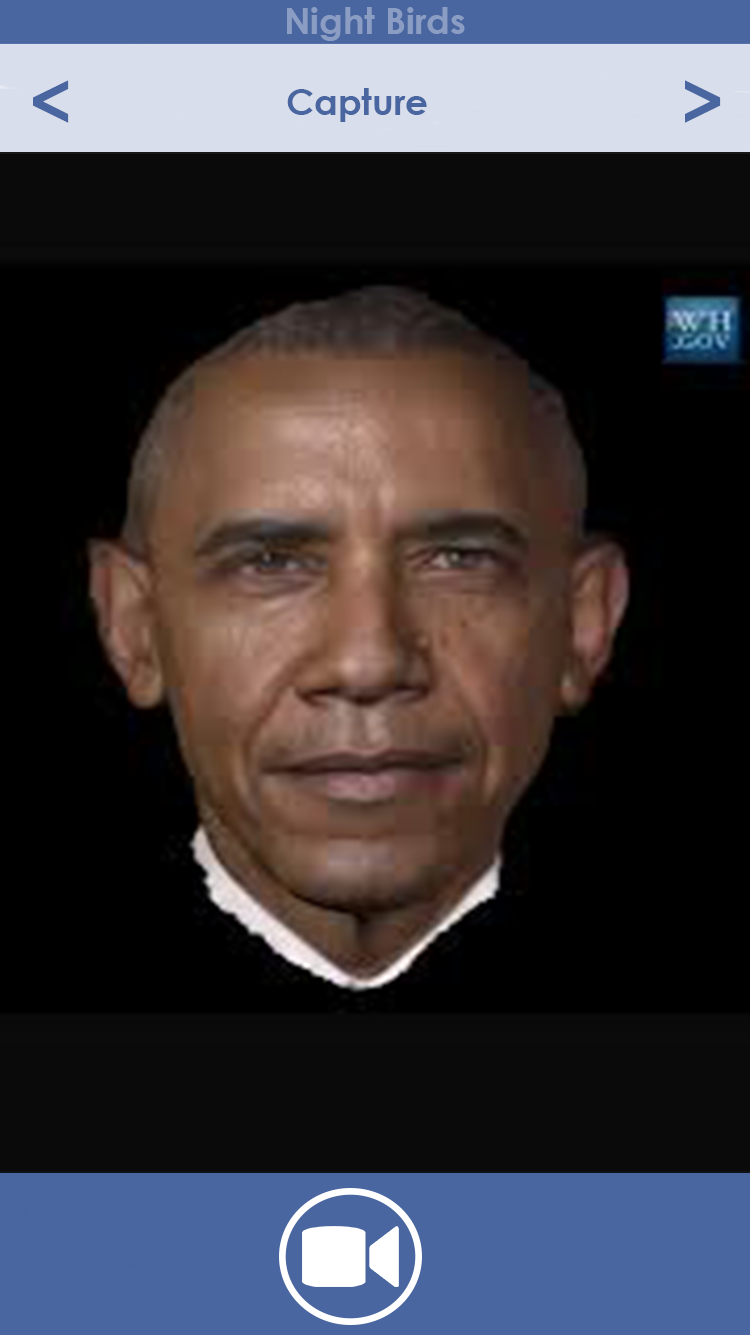
<style>
.page{position:relative;width:750px;height:1335px;background:#000000}
.page>*{position:absolute;margin:0}
.t1{font:36px "CenturyGothic-Bold";color:#8b9dc3}
.t2{font:72px "CenturyGothic-Bold";color:#4966a0}
.t3{font:36px "CenturyGothic-Bold";color:#4966a0}
</style>
<div class="page">
<p class="t1" style="left:287px;top:7px;width:178px;height:34px">Night Birds</p>
<p class="t2" style="left:33px;top:80px;width:36px;height:43px">&lt;</p>
<p class="t3" style="left:287px;top:88px;width:140px;height:34px">Capture</p>
<p class="t2" style="left:685px;top:80px;width:36px;height:43px">&gt;</p>
</div>
